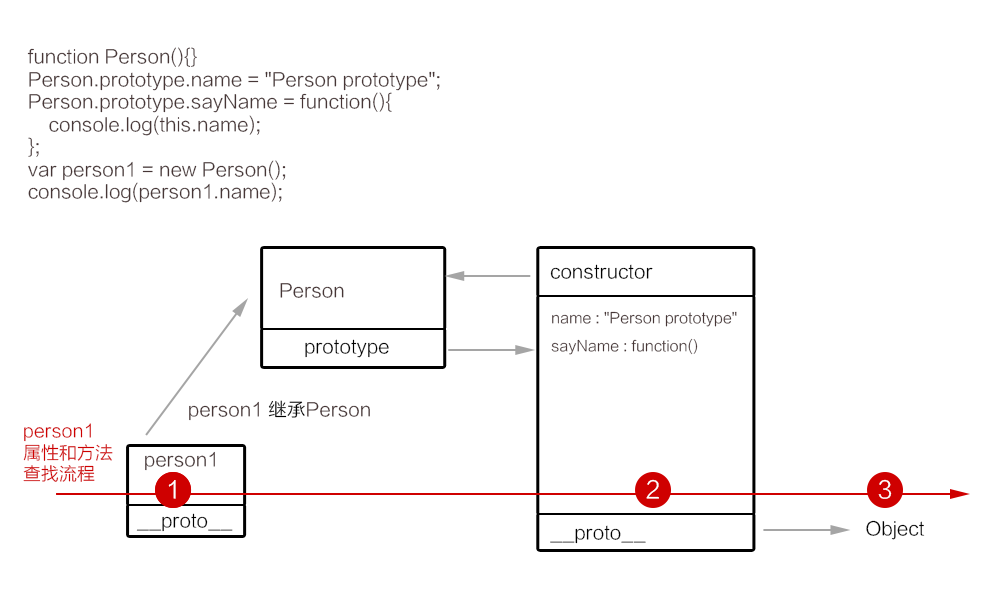
<style>
.page{position:relative;width:1000px;height:608px;background:#ffffff}
.page>*{position:absolute;margin:0}
.t1{font:18.8px "FZLTXHK";color:#473636}
.t2{font:18.8px "FZLTXHK";color:#000000}
.t3{font:14.7px "FZLTXHK";color:#473636}
.t4{font:18px "FZLTXHK";color:#cf0000}
.t5{font:24px "FZLTXHK";color:#ffffff}
</style>
<div class="page">
<p class="t1" style="left:27px;top:47px;width:413px;height:156px">function Person(){}<br>Person.prototype.name = "Person prototype";<br>Person.prototype.sayName = function(){<br>    console.log(this.name);<br>};<br>var person1 = new Person();<br>console.log(person1.name);</p>
<p class="t2" style="left:550px;top:264px;width:103px;height:15px">constructor</p>
<p class="t1" style="left:280px;top:283px;width:64px;height:15px">Person</p>
<p class="t3" style="left:552px;top:311px;width:185px;height:16px">name : "Person prototype"</p>
<p class="t2" style="left:305px;top:339px;width:84px;height:19px">prototype</p>
<p class="t3" style="left:551px;top:338px;width:147px;height:17px">sayName : function()</p>
<p class="t1" style="left:189px;top:400px;width:181px;height:21px">person1 <span class="t2">继承</span>Person</p>
<p class="t4" style="left:23px;top:423px;width:90px;height:59px">person1<br>属性和方法<br>查找流程</p>
<p class="t1" style="left:145px;top:451px;width:70px;height:20px">person1</p>
<p class="t5" style="left:168px;top:480px;width:8px;height:19px">1</p>
<p class="t5" style="left:168px;top:480px;width:8px;height:19px">1</p>
<p class="t5" style="left:646px;top:479px;width:13px;height:20px">2</p>
<p class="t5" style="left:878px;top:479px;width:14px;height:20px">3</p>
<p class="t2" style="left:136px;top:513px;width:97px;height:19px">__proto__</p>
<p class="t2" style="left:866px;top:520px;width:59px;height:20px">Object</p>
<p class="t2" style="left:550px;top:525px;width:96px;height:19px">__proto__</p>
</div>
